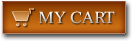
<style>
.page{position:relative;width:132px;height:41px}
.page>*{position:absolute;margin:0}
.t1{font:16px "Concorde-Roman";text-transform:uppercase}
</style>
<div class="page">
<p class="t1" style="left:39px;top:11px;width:76px;height:13px">my CART</p>
</div>
